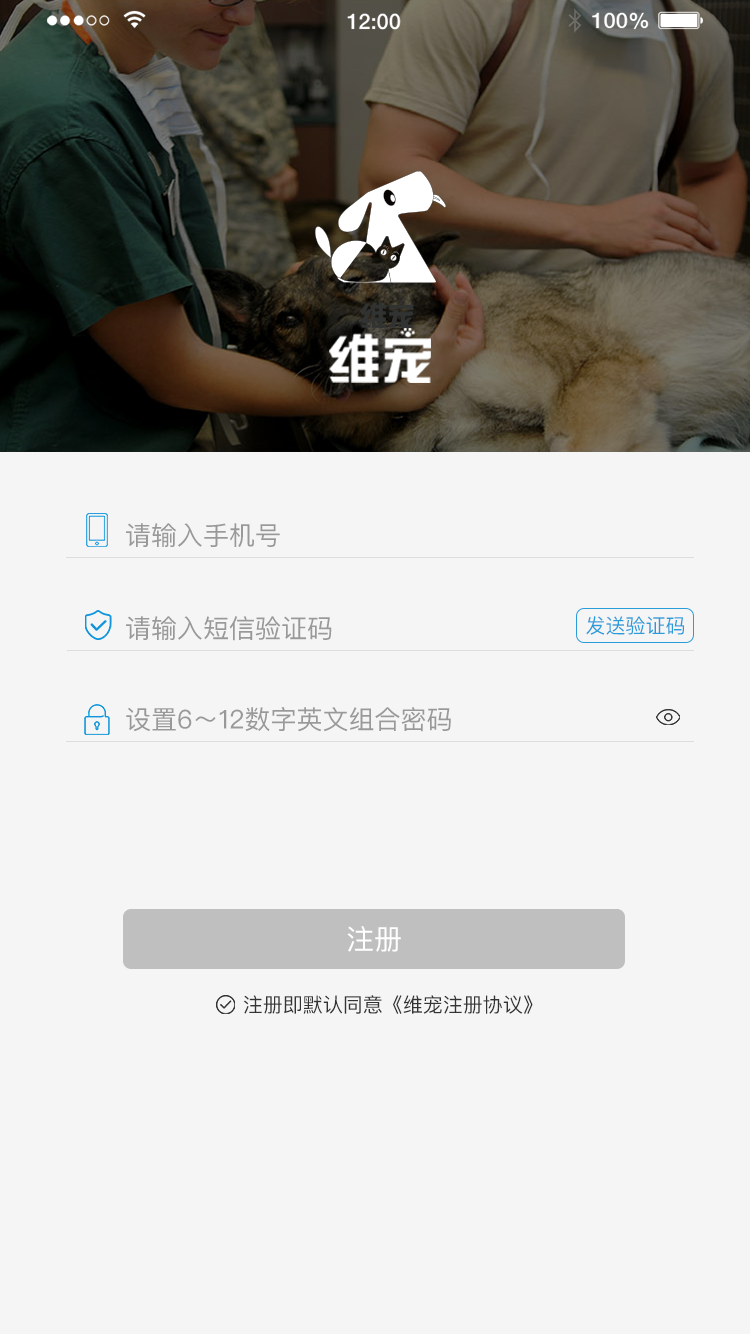
<style>
.page{position:relative;width:750px;height:1334px;background:#f5f5f5}
.page>*{position:absolute;margin:0}
.t1{font:26px "PingFangSC-Regular";color:#999999}
.t2{font:20px "PingFangSC-Regular";color:#2a9cda}
.t3{font:28px "PingFangSC-Regular";color:#ffffff}
.t4{font:20px "PingFangSC-Regular";color:#333333}
</style>
<div class="page">
<p class="t1" style="left:126px;top:523px;width:154px;height:25px">请输入手机号</p>
<p class="t1" style="left:126px;top:616px;width:206px;height:25px">请输入短信验证码</p>
<p class="t2" style="left:586px;top:616px;width:98px;height:19px">发送验证码</p>
<p class="t1" style="left:126px;top:707px;width:325px;height:25px">设置6～12数字英文组合密码</p>
<p class="t3" style="left:347px;top:926px;width:54px;height:26px">注册</p>
<p class="t4" style="left:243px;top:995px;width:290px;height:19px">注册即默认同意《维宠注册协议》</p>
</div>
